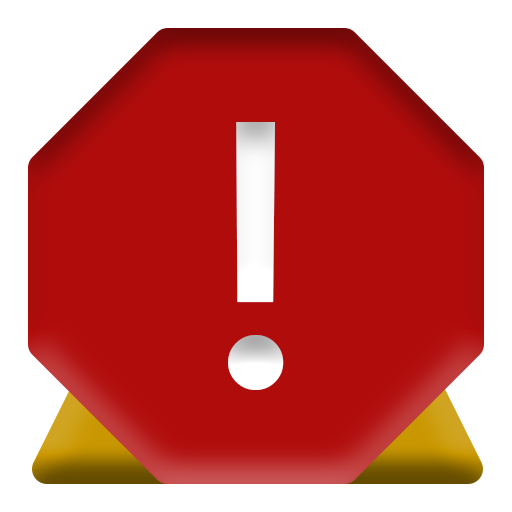
<style>
.page{position:relative;width:512px;height:512px;background:#b10c0c}
.page>*{position:absolute;margin:0}
.t1{font:380.6px "CascadiaCode-Regular";color:#ffffff;text-transform:uppercase}
</style>
<div class="page">
<p class="t1" style="left:228px;top:122px;width:56px;height:268px">!</p>
<p class="t1" style="left:228px;top:122px;width:56px;height:268px">!</p>
</div>
